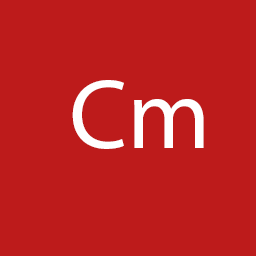
<style>
.page{position:relative;width:256px;height:256px;background:#bd1b1b}
.page>*{position:absolute;margin:0}
.t1{font:100px "MyriadPro-Regular";color:#ffffff}
</style>
<div class="page">
<p class="t1" style="left:72px;top:80px;width:132px;height:69px">Cm</p>
</div>
